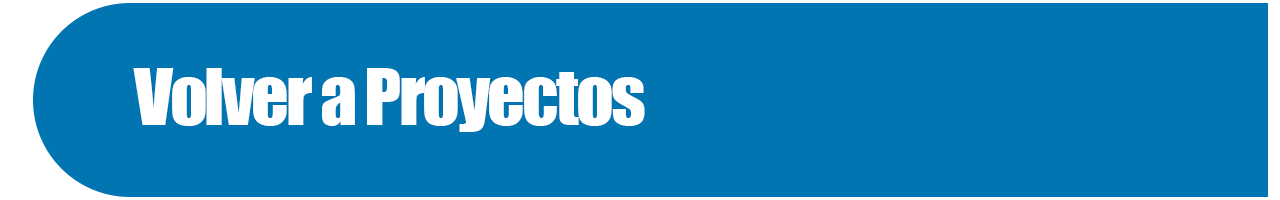
<style>
.page{position:relative;width:1280px;height:200px;background:#0075b2}
.page>*{position:absolute;margin:0}
.t1{font:72px "Impact";letter-spacing:-0.04em;color:#ffffff;scale:1.03 1}
</style>
<div class="page">
<p class="t1" style="left:133px;top:68px;width:512px;height:64px">Volver a Proyectos</p>
</div>
